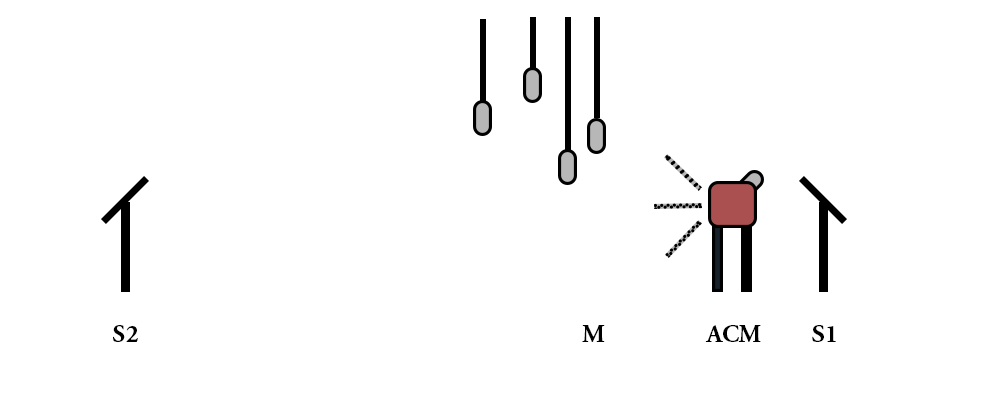
<style>
.page{position:relative;width:1000px;height:400px;background:#ffffff}
.page>*{position:absolute;margin:0}
.t1{font:25px "AGaramondPro-Bold";color:#000000}
</style>
<div class="page">
<p class="t1" style="left:113px;top:325px;width:25px;height:17px">S2</p>
<p class="t1" style="left:582px;top:325px;width:23px;height:17px">M</p>
<p class="t1" style="left:705px;top:325px;width:56px;height:17px">ACM</p>
<p class="t1" style="left:812px;top:325px;width:24px;height:17px">S1</p>
</div>
